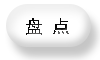
<style>
.page{position:relative;width:100px;height:60px;background:#ffffff}
.page>*{position:absolute;margin:0}
.t1{font:18px "SimHei";color:#0b0a0a}
</style>
<div class="page">
<p class="t1" style="left:26px;top:18px;width:43px;height:17px">盘 点</p>
</div>
